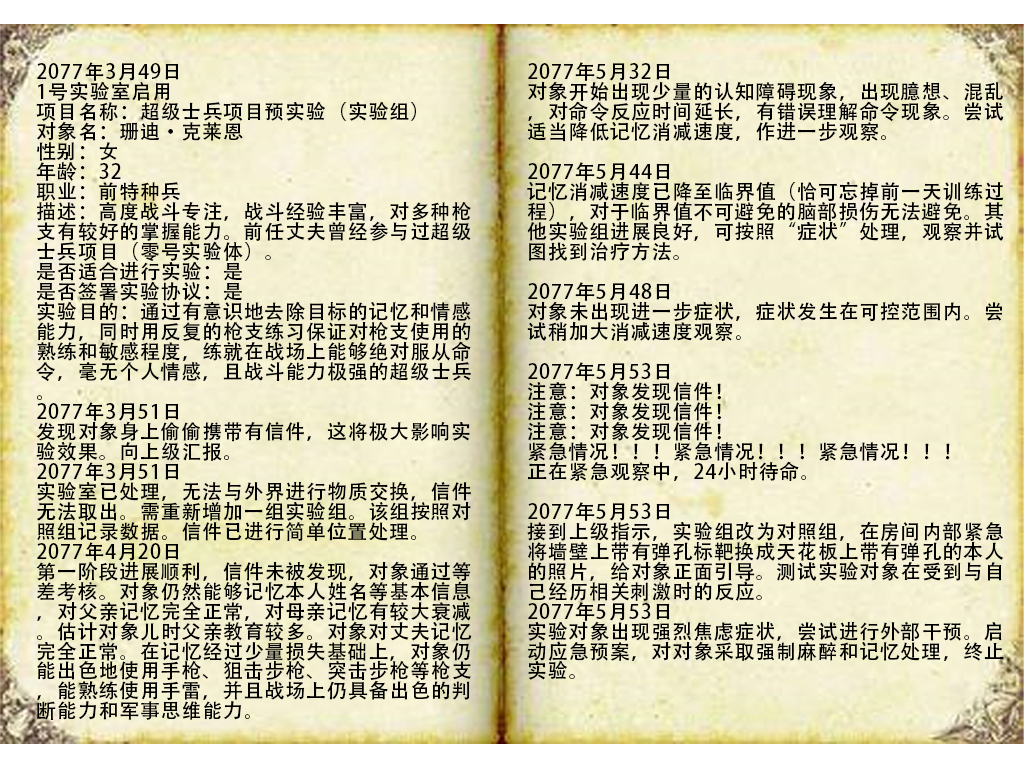
<style>
.page{position:relative;width:1024px;height:768px}
.page>*{position:absolute;margin:0}
.t1{font:20px/20px "AdobeHeitiStd-Regular";letter-spacing:0.04em;color:#000000}
.t2{font:20px/20px "FZSTK--GBK1-0";letter-spacing:0.04em;color:#fa0b16}
</style>
<div class="page">
<p class="t1" style="left:36px;top:62px;width:436px;height:658px">2077年3月49日<br>1号实验室启用<br>项目名称：超级士兵项目预实验（实验组）<br>对象名：珊迪·克莱恩<br>性别：女<br>年龄：32<br>职业：前特种兵<br>描述：高度战斗专注，战斗经验丰富，对多种枪支有较好的掌握能力。前任丈夫曾经参与过超级士兵项目（零号实验体）。<br>是否适合进行实验：是<br>是否签署实验协议：是<br>实验目的：通过有意识地去除目标的记忆和情感能力，同时用反复的枪支练习保证对枪支使用的熟练和敏感程度，练就在战场上能够绝对服从命令，毫无个人情感，且战斗能力极强的超级士兵。<br>2077年3月51日<br>发现对象身上偷偷携带有信件，这将极大影响实验效果。向上级汇报。<br>2077年3月51日<br>实验室已处理，无法与外界进行物质交换，信件无法取出。需重新增加一组实验组。该组按照对照组记录数据。信件已进行简单位置处理。<br>2077年4月20日<br>第一阶段进展顺利，信件未被发现，对象通过等差考核。对象仍然能够记忆本人姓名等基本信息，对父亲记忆完全正常，对母亲记忆有较大衰减。估计对象儿时父亲教育较多。对象对丈夫记忆完全正常。在记忆经过少量损失基础上，对象仍能出色地使用手枪、狙击步枪、突击步枪等枪支，能熟练使用手雷，并且战场上仍具备出色的判断能力和军事思维能力。<br><span class="t2">2077年5月32日<br>对象开始出现少量的认知障碍现象，出现臆想、混乱，对命令反应时间延长，有错误理解命令现象。尝试适当降低记忆消减速度，作进一步观察。<br>2077年5月44日<br>记忆消减速度已降至临界值（恰可忘掉前一天训练过程），对于临界值不可避免的脑部损伤无法避免。其他实验组进展良好，可按照“症状”处理，观察并试图找到治疗方法。<br>2077年5月48日<br>对象未出现进一步症状，症状发生在可控范围内。尝试稍加大消减速度观察。</span></p>
<p class="t1" style="left:527px;top:62px;width:477px;height:618px">2077年5月32日<br>对象开始出现少量的认知障碍现象，出现臆想、混乱，对命令反应时间延长，有错误理解命令现象。尝试适当降低记忆消减速度，作进一步观察。<br><br>2077年5月44日<br>记忆消减速度已降至临界值（恰可忘掉前一天训练过程），对于临界值不可避免的脑部损伤无法避免。其他实验组进展良好，可按照“症状”处理，观察并试图找到治疗方法。<br><br>2077年5月48日<br>对象未出现进一步症状，症状发生在可控范围内。尝试稍加大消减速度观察。<br><br>2077年5月53日<br>注意：对象发现信件！<br>注意：对象发现信件！<br>注意：对象发现信件！<br>紧急情况！！！紧急情况！！！紧急情况！！！<br>正在紧急观察中，24小时待命。<br><br>2077年5月53日<br>接到上级指示，实验组改为对照组，在房间内部紧急将墙壁上带有弹孔标靶换成天花板上带有弹孔的本人的照片，给对象正面引导。测试实验对象在受到与自己经历相关刺激时的反应。<br>2077年5月53日<br>实验对象出现强烈焦虑症状，尝试进行外部干预。启动应急预案，对对象采取强制麻醉和记忆处理，终止实验。</p>
</div>
